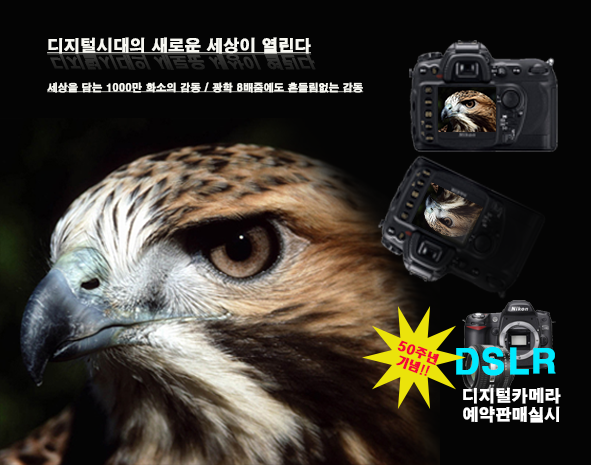
<style>
.page{position:relative;width:591px;height:465px;background:#040404}
.page>*{position:absolute;margin:0}
.t1{font:16px "H2gtrE";color:#f8f8f2;font-weight:bold;text-decoration:underline}
.t2{font:17.5px "H2gtrE";color:#2d2d2b;font-weight:bold;text-decoration:underline;scale:0.91 1}
.t3{font:10px "H2gtrE";color:#f8f8f2;font-weight:bold;text-decoration:underline}
.t4{font:12px "HeadlineR-HM";color:#f30834;font-weight:bold}
.t5{font:33.9px "H2gtrE";color:#00eaff;font-weight:bold}
.t6{font:16px "H2gtrE";color:#ffffff;font-weight:bold}
</style>
<div class="page">
<p class="t1" style="left:47px;top:37px;width:264px;height:17px">디지털시대의 새로운 세상이 열린다</p>
<p class="t2" style="left:47px;top:53px;width:269px;height:17px">디지털시대의 새로운 세상이 열린다</p>
<p class="t3" style="left:47px;top:82px;width:317px;height:11px">세상을 담는 1000만 화소의 감동 / 광학 8배줌에도 흔들림없는 감동</p>
<p class="t4" style="left:395px;top:340px;width:45px;height:36px;text-align:center;rotate:21deg">50주년<br>기념!!</p>
<p class="t5" style="left:456px;top:347px;width:100px;height:29px">DSLR</p>
<p class="t6" style="left:463px;top:387px;width:98px;height:36px;text-align:center">디지털카메라<br>예약판매실시</p>
</div>
